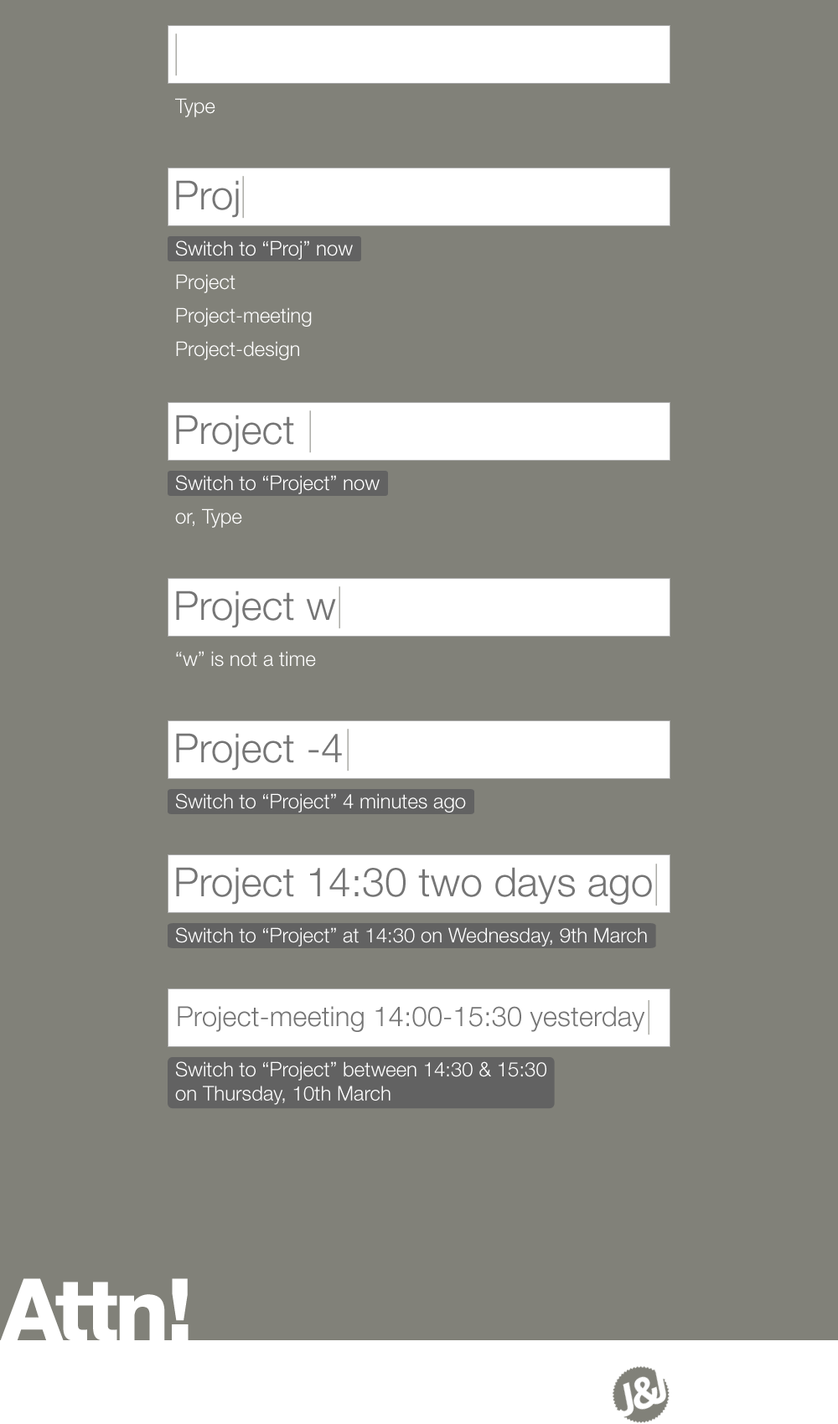
<style>
.page{position:relative;width:838px;height:1424px;background:#818179}
.page>*{position:absolute;margin:0}
.t1{font:20.1px "HelveticaNeueLTStd-Lt";color:#ffffff}
.t2{font:40.2px "HelveticaNeueLTStd-Lt";letter-spacing:0.002em;color:#757575}
.t3{font:27.6px "HelveticaNeueLTStd-Lt";letter-spacing:0.002em;color:#757575}
.t4{font:86.6px "HelveticaNeueLTStd-Hv";letter-spacing:-0.025em;color:#ffffff}
</style>
<div class="page">
<p class="t1" style="left:175px;top:98px;width:40px;height:19px">Type</p>
<p class="t2" style="left:176px;top:180px;width:63px;height:38px">Proj</p>
<p class="t1" style="left:176px;top:240px;width:177px;height:20px">Switch to “Proj” now</p>
<p class="t1" style="left:176px;top:274px;width:59px;height:19px">Project</p>
<p class="t1" style="left:176px;top:307px;width:136px;height:20px">Project-meeting</p>
<p class="t1" style="left:176px;top:341px;width:123px;height:19px">Project-design</p>
<p class="t2" style="left:176px;top:415px;width:118px;height:37px">Project</p>
<p class="t1" style="left:176px;top:475px;width:203px;height:19px">Switch to “Project” now</p>
<p class="t1" style="left:175px;top:508px;width:67px;height:20px">or, Type</p>
<p class="t2" style="left:176px;top:590px;width:160px;height:38px">Project w</p>
<p class="t1" style="left:176px;top:651px;width:140px;height:16px">“w” is not a time</p>
<p class="t2" style="left:176px;top:733px;width:166px;height:38px">Project -4</p>
<p class="t1" style="left:176px;top:793px;width:290px;height:19px">Switch to “Project” 4 minutes ago</p>
<p class="t2" style="left:176px;top:867px;width:476px;height:38px">Project 14:30 two days ago</p>
<p class="t1" style="left:176px;top:927px;width:471px;height:19px">Switch to “Project” at 14:30 on Wednesday, 9th March</p>
<p class="t3" style="left:178px;top:1006px;width:467px;height:26px">Project-meeting 14:00-15:30 yesterday</p>
<p class="t1" style="left:175px;top:1061px;width:371px;height:44px">Switch to “Project” between 14:30 &amp; 15:30<br>on Thursday, 10th March</p>
<p class="t4" style="left:0px;top:1278px;width:188px;height:63px">Attn!</p>
</div>
